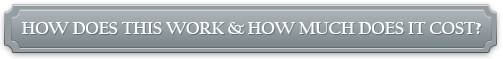
<style>
.page{position:relative;width:503px;height:59px}
.page>*{position:absolute;margin:0}
.t1{font:17.5px "CalifornianFB-Bold";color:#ffffff;text-transform:uppercase}
</style>
<div class="page">
<p class="t1" style="left:21px;top:22px;width:460px;height:12px">How Does this Work &amp; How Much Does it Cost?</p>
</div>
